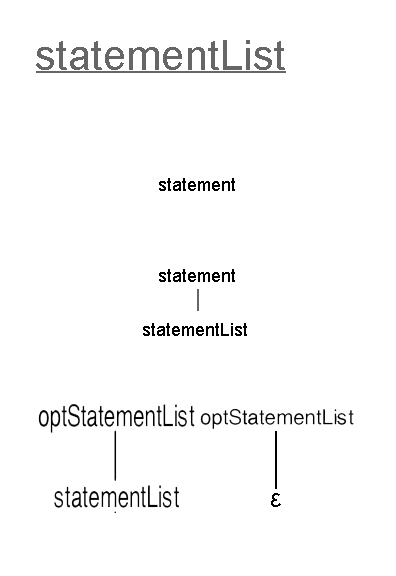
<style>
.page{position:relative;width:396px;height:576px;background:#ffffff}
.page>*{position:absolute;margin:0}
.t1{font:42px "ArialMT";color:#666666}
.t2{font:18px "ArialMT";color:#000000}
.t3{font:26px "ArialMT";color:#000000}
</style>
<div class="page">
<p class="t1" style="left:36px;top:40px;width:249px;height:30px">statementList</p>
<p class="t2" style="left:159px;top:178px;width:76px;height:13px">statement</p>
<p class="t2" style="left:159px;top:269px;width:76px;height:13px">statement</p>
<p class="t2" style="left:143px;top:323px;width:104px;height:13px">statementList</p>
<p class="t3" style="left:271px;top:493px;width:10px;height:14px">ε</p>
</div>
